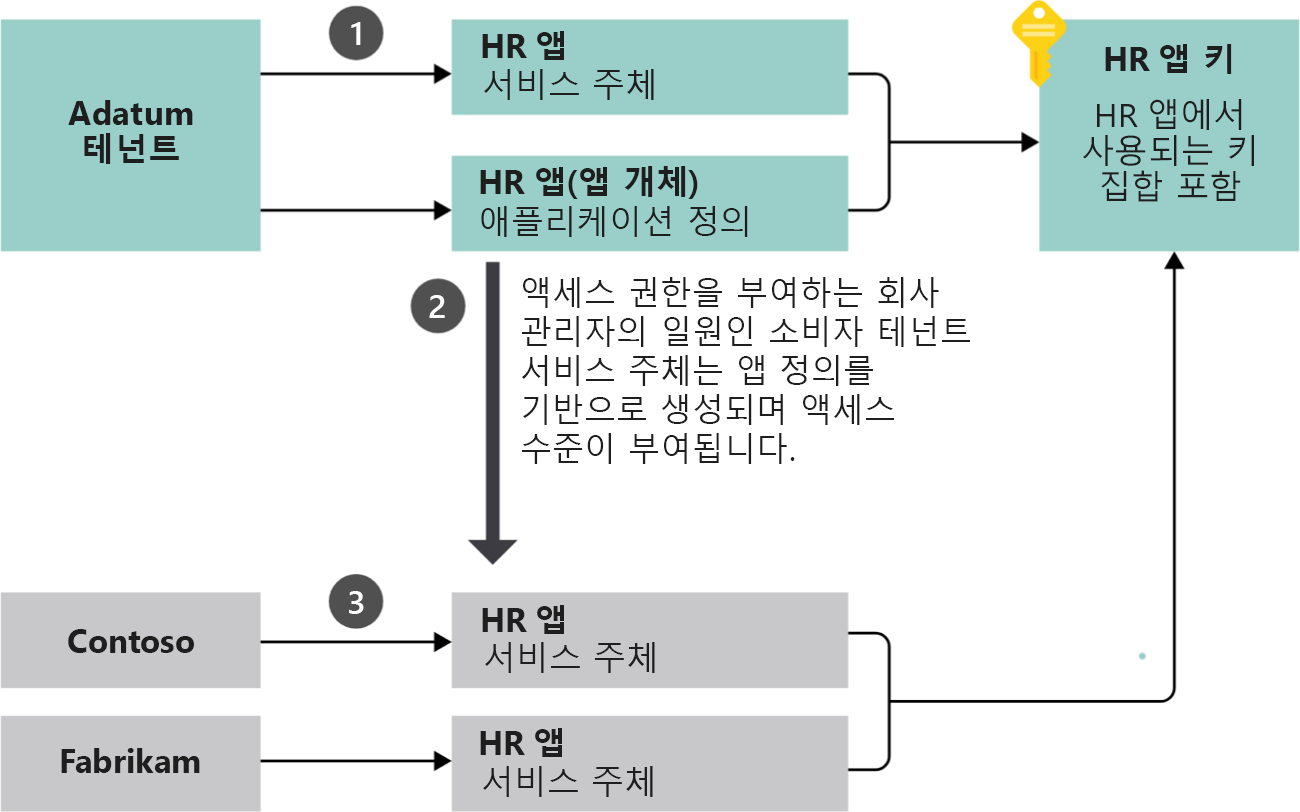
<style>
.page{position:relative;width:1300px;height:812px;background:#ffffff}
.page>*{position:absolute;margin:0}
.t1{font:32.5px "SegoeUI-Semibold";color:#ffffff;scale:1.04 1}
.t2{font:32.9px "SegoeUI-Bold";color:#1e1e1e}
.t3{font:32.9px "MalgunGothicBold";color:#1e1e1e}
.t4{font:32.9px "MalgunGothic";color:#1e1e1e}
.t5{font:32.9px/36px "SegoeUI-Bold";color:#1e1e1e}
.t6{font:32.9px/36px "MalgunGothicBold";color:#1e1e1e}
.t7{font:32.9px/36px "MalgunGothic";color:#1e1e1e}
.t8{font:32.9px/36px "SegoeUI";color:#1e1e1e}
.t9{font:32.9px/39px "MalgunGothic";color:#1e1e1e}
</style>
<div class="page">
<p class="t1" style="left:351px;top:22px;width:10px;height:23px">1</p>
<p class="t2" style="left:482px;top:31px;width:82px;height:29px">HR <span class="t3">앱</span></p>
<p class="t3" style="left:1105px;top:44px;width:127px;height:30px"><span class="t2">HR </span>앱 키</p>
<p class="t4" style="left:484px;top:69px;width:170px;height:31px">서비스 주체</p>
<p class="t5" style="left:68px;top:100px;width:125px;height:64px;text-align:center">Adatum <span class="t6">테넌트</span></p>
<p class="t7" style="left:1083px;top:99px;width:171px;height:103px;text-align:center"><span class="t8">HR </span>앱에서 사용되는 키 집합 포함</p>
<p class="t3" style="left:480px;top:166px;width:218px;height:33px"><span class="t2">HR </span>앱(앱 개체)</p>
<p class="t4" style="left:481px;top:206px;width:267px;height:31px">애플리케이션 정의</p>
<p class="t9" style="left:521px;top:277px;width:449px;height:187px">액세스 권한을 부여하는 회사 관리자의 일원인 소비자 테넌트 서비스 주체는 앱 정의를 기반으로 생성되며 액세스 수준이 부여됩니다.</p>
<p class="t1" style="left:429px;top:295px;width:16px;height:23px">2</p>
<p class="t1" style="left:349px;top:591px;width:15px;height:23px">3</p>
<p class="t2" style="left:482px;top:605px;width:82px;height:29px">HR <span class="t3">앱</span></p>
<p class="t2" style="left:68px;top:629px;width:126px;height:24px">Contoso</p>
<p class="t4" style="left:485px;top:642px;width:170px;height:31px">서비스 주체</p>
<p class="t2" style="left:480px;top:728px;width:82px;height:29px">HR <span class="t3">앱</span></p>
<p class="t2" style="left:61px;top:748px;width:139px;height:25px">Fabrikam</p>
<p class="t4" style="left:483px;top:766px;width:170px;height:31px">서비스 주체</p>
</div>
